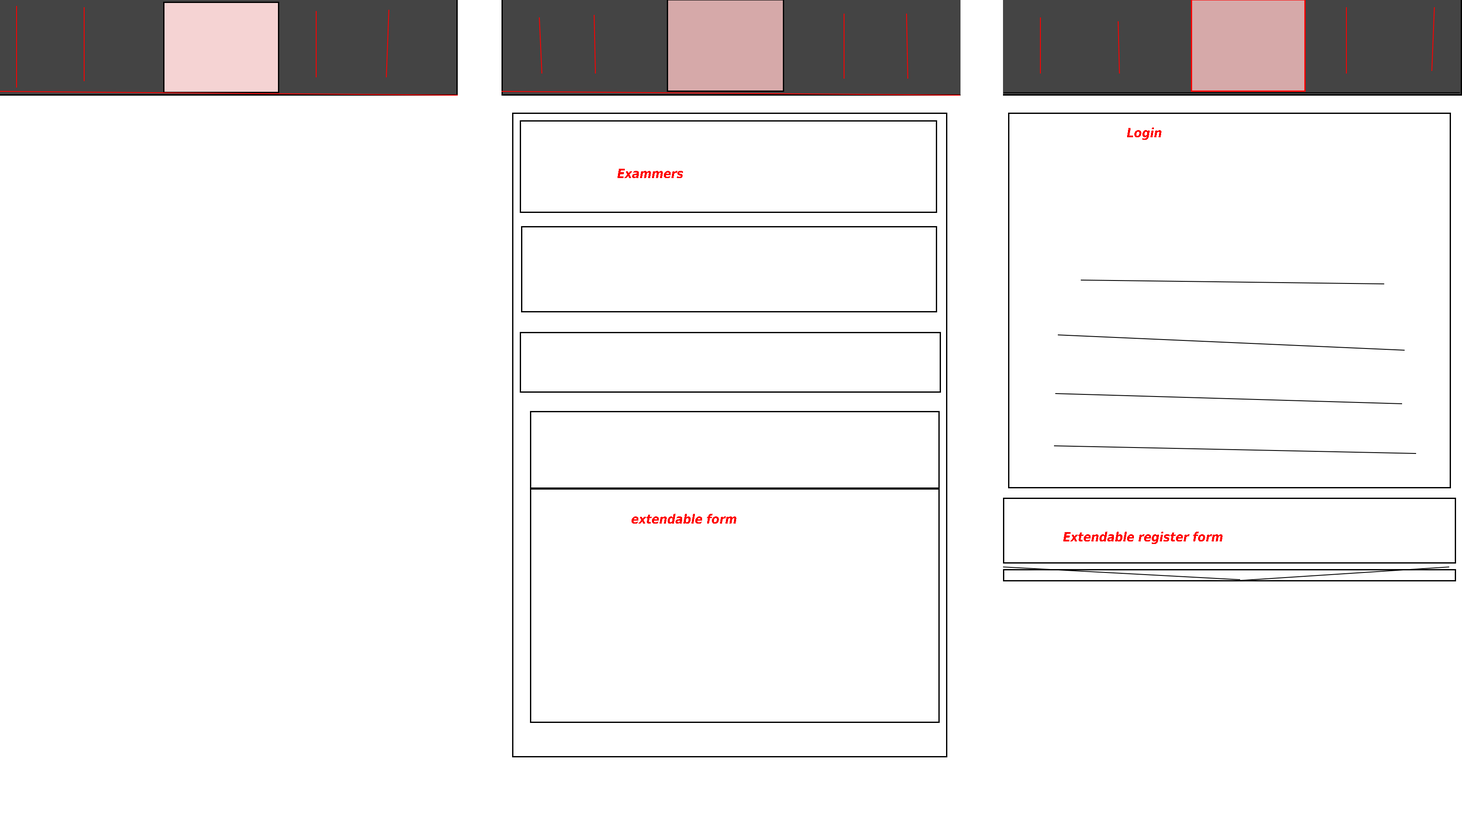
<style>
.page{position:relative;width:1462px;height:816px;background:#ffffff}
.page>*{position:absolute;margin:0}
.t1{font:12.7px "DejaVuSansCondensed-BoldOblique";color:#ff0000}
</style>
<div class="page">
<p class="t1" style="left:1127px;top:127px;width:34px;height:13px">Login</p>
<p class="t1" style="left:617px;top:169px;width:66px;height:9px">Exammers</p>
<p class="t1" style="left:631px;top:514px;width:105px;height:9px">extendable form</p>
<p class="t1" style="left:1063px;top:532px;width:159px;height:12px">Extendable register form</p>
</div>
